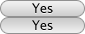
<style>
.page{position:relative;width:85px;height:34px}
.page>*{position:absolute;margin:0}
.t1{font:13px "LucidaGrande";letter-spacing:-0.025em;color:#000000}
</style>
<div class="page">
<p class="t1" style="left:32px;top:3px;width:21px;height:10px">Yes</p>
<p class="t1" style="left:32px;top:20px;width:21px;height:10px">Yes</p>
</div>
